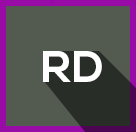
<style>
.page{position:relative;width:136px;height:132px;background:#535a50}
.page>*{position:absolute;margin:0}
.t1{font:44px "NexaBold";color:#ffffff}
</style>
<div class="page">
<p class="t1" style="left:43px;top:51px;width:59px;height:31px">RD</p>
</div>
